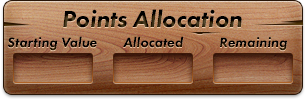
<style>
.page{position:relative;width:306px;height:100px}
.page>*{position:absolute;margin:0}
.t1{font:24px "FuturaPT-HeavyObl"}
.t2{font:14px "FuturaPT-HeavyObl";color:#000000}
</style>
<div class="page">
<p class="t1" style="left:63px;top:9px;width:179px;height:19px">Points Allocation</p>
<p class="t2" style="left:7px;top:36px;width:90px;height:15px">Starting Value</p>
<p class="t2" style="left:123px;top:36px;width:61px;height:12px">Allocated</p>
<p class="t2" style="left:220px;top:37px;width:67px;height:14px">Remaining</p>
</div>
